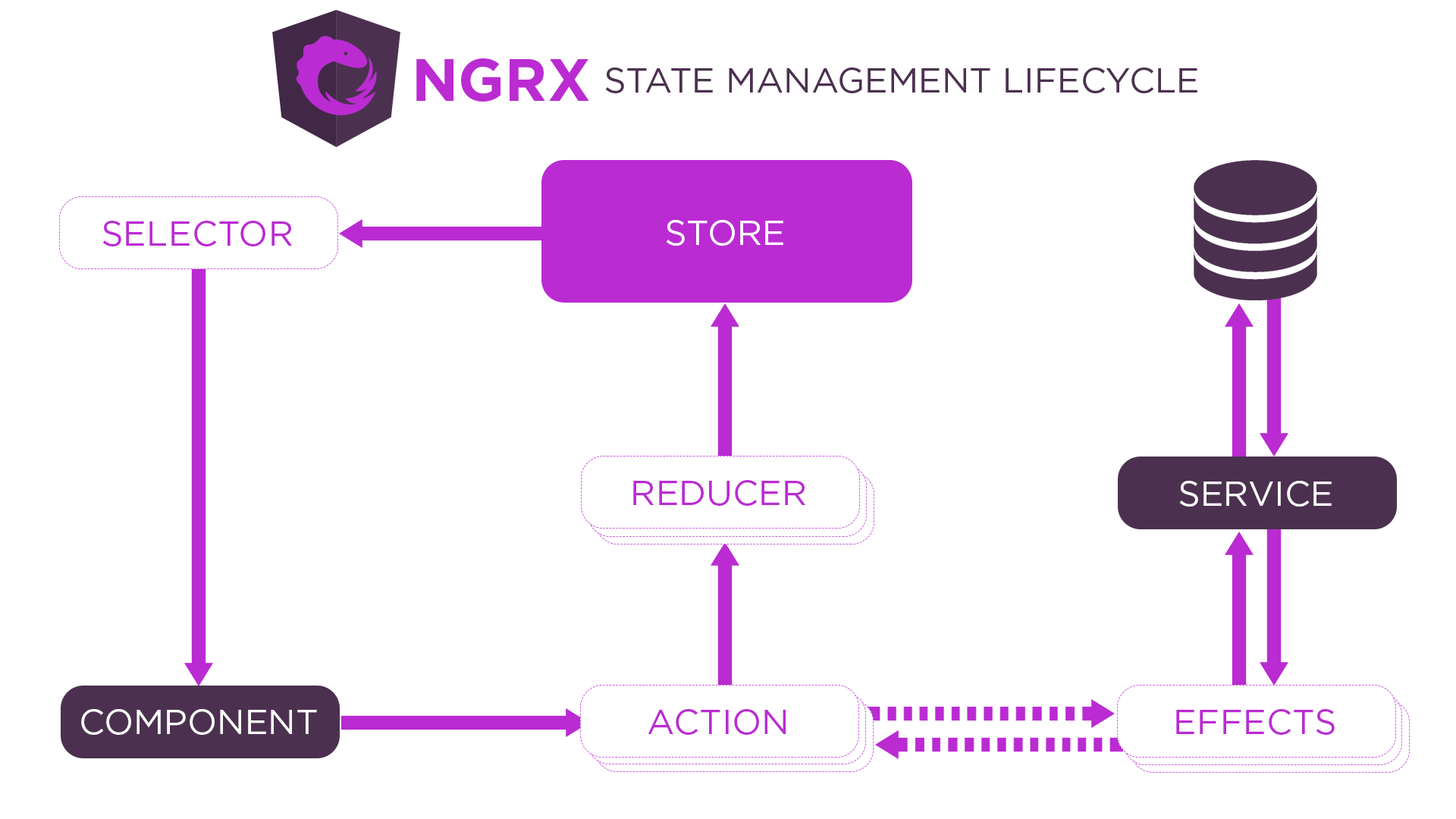
<style>
.page{position:relative;width:1456px;height:819px;background:#ffffff}
.page>*{position:absolute;margin:0}
.t1{font:59.1px "GothamHTF-Bold";color:#ba2bd2;text-transform:uppercase}
.t2{font:34.9px "GothamHTF-Book";color:#4b314f;text-transform:uppercase}
.t3{font:35px "GothamHTF-Book";color:#ba2bd2;text-transform:uppercase}
.t4{font:35px "GothamHTF-Book";color:#ffffff;text-transform:uppercase}
</style>
<div class="page">
<p class="t1" style="left:416px;top:58px;width:173px;height:44px">NGRX</p>
<p class="t2" style="left:605px;top:67px;width:592px;height:26px">STATE MANAGEMENT LIFECYCLE</p>
<p class="t3" style="left:102px;top:221px;width:190px;height:25px">SELECTOR</p>
<p class="t4" style="left:666px;top:220px;width:117px;height:26px">STORE</p>
<p class="t3" style="left:633px;top:480px;width:172px;height:26px">REDUCER</p>
<p class="t4" style="left:1179px;top:481px;width:153px;height:26px">SERVICE</p>
<p class="t4" style="left:81px;top:709px;width:236px;height:26px">Component</p>
<p class="t3" style="left:648px;top:709px;width:138px;height:26px">Action</p>
<p class="t3" style="left:1176px;top:709px;width:159px;height:26px">EFfectS</p>
</div>
